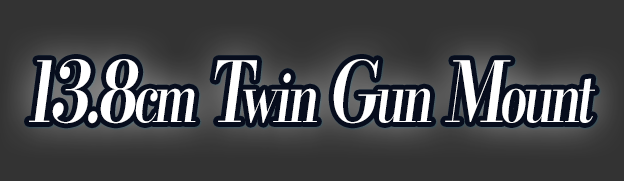
<style>
.page{position:relative;width:624px;height:181px;background:#333333}
.page>*{position:absolute;margin:0}
.t1{font:84px "KochoStd-Heavy";letter-spacing:-0.08em;color:#ffffff;font-style:italic;scale:0.75 1}
.t2{font:67.2px "KochoStd-Heavy";letter-spacing:-0.08em;color:#ffffff;font-style:italic;scale:0.75 1}
</style>
<div class="page">
<p class="t1" style="left:29px;top:59px;width:566px;height:65px">13.8<span class="t2">cm</span> T<span class="t2">win </span>G<span class="t2">un</span> M<span class="t2">ount</span></p>
</div>
